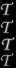
<style>
.page{position:relative;width:16px;height:68px;background:#000000}
.page>*{position:absolute;margin:0}
.t1{font:18px "STLiti";letter-spacing:0.1em;color:#cccdcc}
.t2{font:18px "STLiti";letter-spacing:0.1em;color:#afb0af}
</style>
<div class="page">
<p class="t1" style="left:1px;top:2px;width:12px;height:13px">T</p>
<p class="t1" style="left:1px;top:20px;width:12px;height:13px">T</p>
<p class="t1" style="left:2px;top:37px;width:12px;height:13px">T</p>
<p class="t2" style="left:1px;top:53px;width:12px;height:13px">T</p>
</div>
